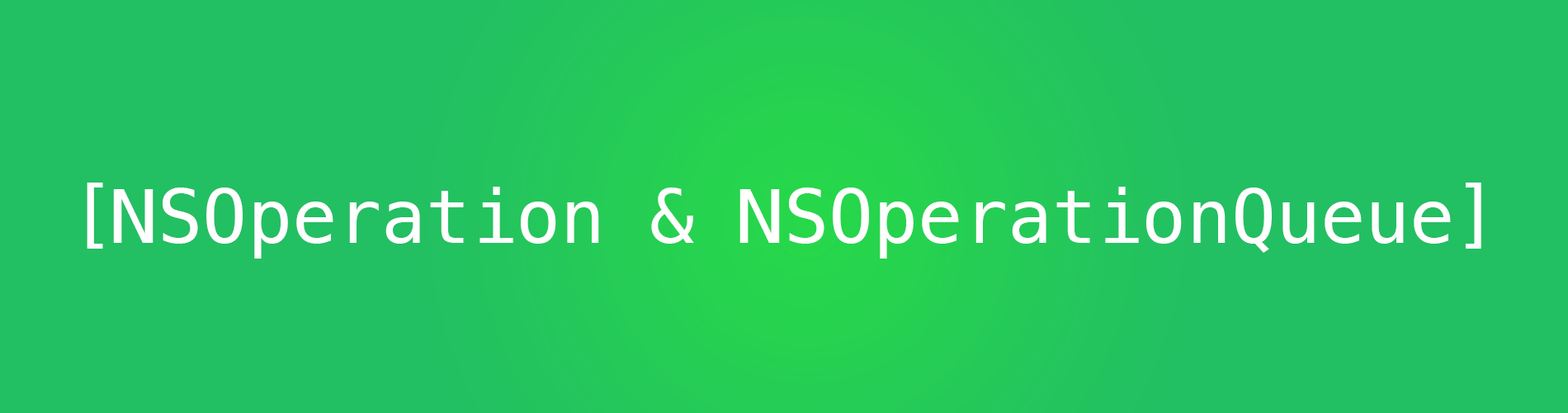
<style>
.page{position:relative;width:1568px;height:413px;background:#23bf63}
.page>*{position:absolute;margin:0}
.t1{font:74.3px "Menlo-Regular";color:#ffffff}
</style>
<div class="page">
<p class="t1" style="left:87px;top:182px;width:1394px;height:76px">[NSOperation &amp; NSOperationQueue]</p>
</div>
